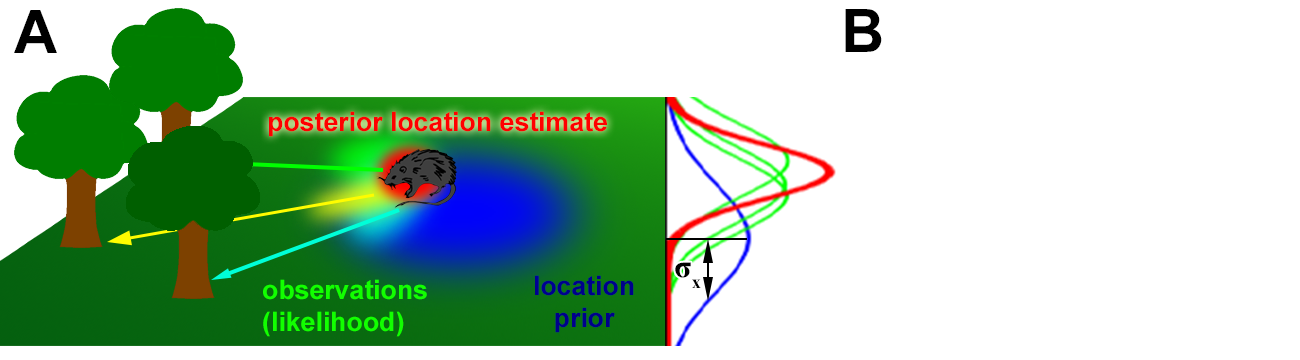
<style>
.page{position:relative;width:1300px;height:360px;background:#ffffff}
.page>*{position:absolute;margin:0}
.t1{font:60px "Arial-BoldMT";color:#000000}
.t2{font:26.7px "Arial-BoldMT";color:#ff0000}
.t3{font:32px "TimesNewRomanPS-BoldMT";color:#000000}
.t4{font:26.7px "Arial-BoldMT";color:#12ff00}
.t5{font:26.7px "Arial-BoldMT";color:#00008b}
</style>
<div class="page">
<p class="t1" style="left:14px;top:10px;width:43px;height:43px">A</p>
<p class="t1" style="left:845px;top:9px;width:37px;height:43px">B</p>
<p class="t2" style="left:269px;top:111px;width:338px;height:26px">posterior location estimate</p>
<p class="t3" style="left:675px;top:262px;width:26px;height:26px">σx</p>
<p class="t4" style="left:263px;top:279px;width:164px;height:58px">observations <br>(likelihood)</p>
<p class="t5" style="left:535px;top:275px;width:99px;height:58px;text-align:center">location<br>prior</p>
</div>
